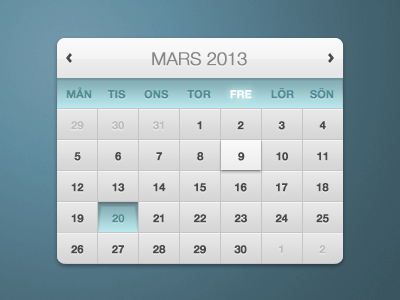
<style>
.page{position:relative;width:400px;height:300px}
.page>*{position:absolute;margin:0}
.t1{font:18px "HelveticaNeue-Light";letter-spacing:-0.018em;color:#878787;font-weight:bold}
.t2{font:11px "HelveticaNeue-Bold";letter-spacing:-0.018em;color:#527b95;font-weight:bold}
.t3{font:11px "HelveticaNeue-Bold";letter-spacing:-0.018em;color:#ffffff;font-weight:bold}
.t4{font:11px "HelveticaNeue-Bold";letter-spacing:-0.018em;color:#484848;font-weight:bold}
.t5{font:11px "HelveticaNeue-Bold";letter-spacing:-0.018em;color:#bcbcbc;font-weight:bold}
.t6{font:11px "HelveticaNeue-Bold";letter-spacing:-0.018em;color:#fefefe;font-weight:bold}
</style>
<div class="page">
<p class="t1" style="left:152px;top:52px;width:95px;height:14px">MARS 2013</p>
<p class="t2" style="left:66px;top:87px;width:268px;height:12px">MÅN     TIS      ONS      TOR                   LÖR     SÖN</p>
<p class="t3" style="left:230px;top:90px;width:22px;height:9px">FRE</p>
<p class="t4" style="left:71px;top:121px;width:255px;height:9px"><span class="t5">29         30         31</span>          1           2           3           4</p>
<p class="t4" style="left:74px;top:152px;width:254px;height:9px">5           6           7           8           9          10         11</p>
<p class="t4" style="left:71px;top:183px;width:258px;height:9px">12         13         14         15         16         17         18</p>
<p class="t4" style="left:71px;top:214px;width:258px;height:9px">19                      21         22         23         24         25</p>
<p class="t2" style="left:112px;top:214px;width:13px;height:9px"><span class="t6">             </span>20</p>
<p class="t4" style="left:71px;top:245px;width:255px;height:9px">26         27         28         29         30          <span class="t5">1           2</span></p>
</div>
